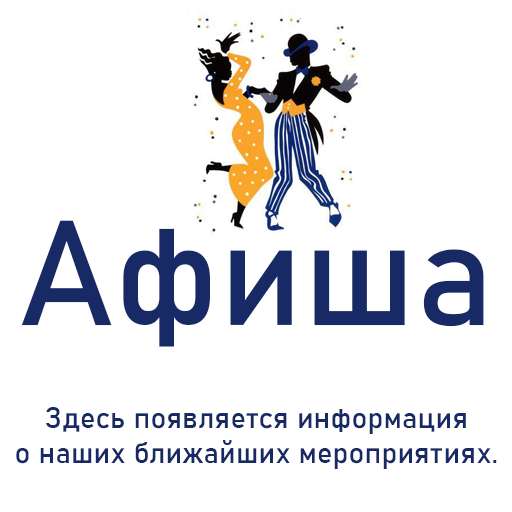
<style>
.page{position:relative;width:512px;height:512px;background:#ffffff}
.page>*{position:absolute;margin:0}
.t1{font:146.7px "Bahnschrift";color:#182a66}
.t2{font:29.3px "Bahnschrift";color:#182a66}
</style>
<div class="page">
<p class="t1" style="left:21px;top:220px;width:463px;height:127px">Афиша</p>
<p class="t2" style="left:16px;top:407px;width:481px;height:62px;text-align:center">Здесь появляется информация<br>о наших ближайших мероприятиях.</p>
</div>
